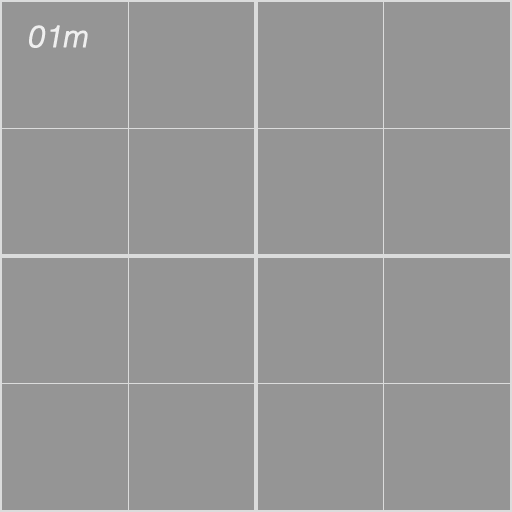
<style>
.page{position:relative;width:512px;height:512px;background:#959595}
.page>*{position:absolute;margin:0}
.t1{font:30px "HelveticaLT-Light";color:#efefef;font-weight:bold;font-style:italic}
</style>
<div class="page">
<p class="t1" style="left:29px;top:25px;width:59px;height:23px">01m</p>
</div>
